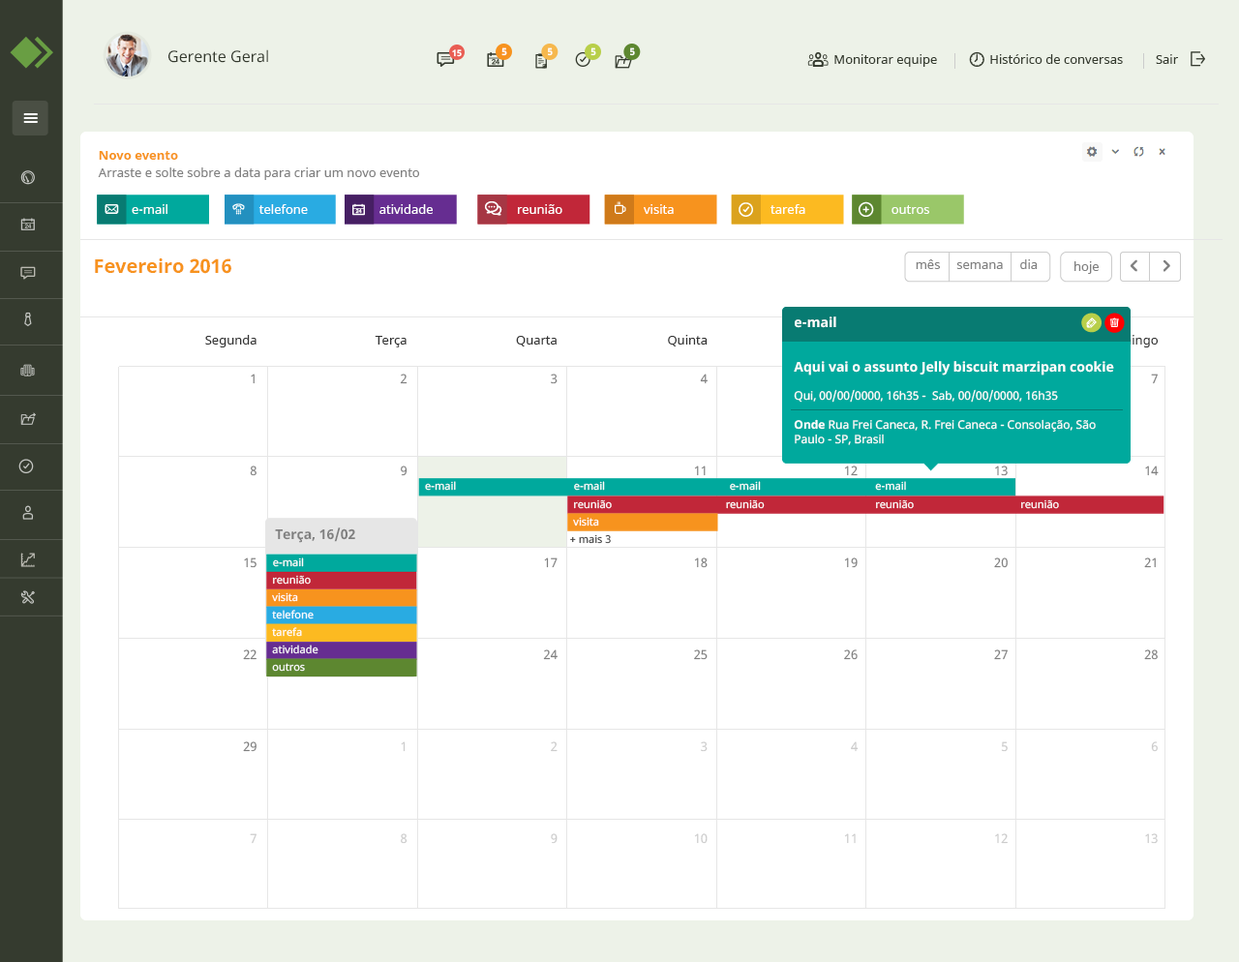
<style>
.page{position:relative;width:1239px;height:962px;background:#ffffff}
.page>*{position:absolute;margin:0}
.t1{font:15.5px "NotoSans";color:#353b2f}
.t2{font:8.7px "NotoSans-Bold";color:#ffffff}
.t3{font:9.7px "NotoSans-Bold";color:#ffffff}
.t4{font:12.6px "NotoSans";color:#353b2f}
.t5{font:12.6px "NotoSans-Bold";color:#f7931e}
.t6{font:12.6px "NotoSans";color:#808080}
.t7{font:12.6px "NotoSans";color:#ffffff}
.t8{font:19.4px "NotoSans-Bold";color:#f7931e}
.t9{font:11.6px/29px "NotoSans";color:#ffffff}
.t10{font:13.5px "NotoSans-Bold";color:#ffffff}
.t11{font:13.5px/29px "NotoSans-Bold";color:#ffffff}
.t12{font:11.6px "NotoSans";color:#ffffff}
.t13{font:11.6px/29px "NotoSans-Bold";color:#ffffff}
.t14{font:12.6px/92px "NotoSans";color:#808080}
.t15{font:12.6px/38.7px "NotoSans";color:#333333}
.t16{font:12.6px/38.7px "NotoSans";color:#808080}
.t17{font:12.6px/92px "NotoSans";color:#cccccc}
.t18{font:10.6px "NotoSans";color:#ffffff}
.t19{font:13.5px "NotoSans-Bold";color:#808080}
.t20{font:10.6px "NotoSans"}
</style>
<div class="page">
<p class="t1" style="left:168px;top:49px;width:100px;height:14px">Gerente Geral</p>
<p class="t2" style="left:452px;top:49px;width:10px;height:8px">15</p>
<p class="t3" style="left:501px;top:47px;width:6px;height:9px">5</p>
<p class="t3" style="left:548px;top:47px;width:5px;height:9px">5</p>
<p class="t3" style="left:591px;top:47px;width:5px;height:9px">5</p>
<p class="t3" style="left:630px;top:47px;width:5px;height:9px">5</p>
<p class="t4" style="left:834px;top:54px;width:344px;height:13px">Monitorar equipe                Histórico de conversas          Sair</p>
<p class="t5" style="left:99px;top:151px;width:79px;height:9px">Novo evento</p>
<p class="t6" style="left:98px;top:167px;width:321px;height:13px">Arraste e solte sobre a data para criar um novo evento</p>
<p class="t7" style="left:132px;top:204px;width:35px;height:10px">e-mail</p>
<p class="t7" style="left:258px;top:204px;width:50px;height:10px">telefone</p>
<p class="t7" style="left:379px;top:204px;width:54px;height:10px">atividade</p>
<p class="t7" style="left:518px;top:204px;width:44px;height:10px">reunião</p>
<p class="t7" style="left:644px;top:204px;width:30px;height:10px">visita</p>
<p class="t7" style="left:771px;top:204px;width:34px;height:10px">tarefa</p>
<p class="t7" style="left:892px;top:205px;width:37px;height:9px">outros</p>
<p class="t8" style="left:95px;top:258px;width:136px;height:16px">Fevereiro 2016</p>
<p class="t6" style="left:916px;top:259px;width:122px;height:10px">mês     semana     dia</p>
<p class="t6" style="left:1075px;top:261px;width:24px;height:13px">hoje</p>
<p class="t9" style="left:794px;top:317px;width:320px;height:128px"><span class="t10">e-mail<br><br></span><span class="t11">Aqui vai o assunto Jelly biscuit </span><span class="t10">marzipan cookie <br></span><span class="t12"><br>Qui, 00/00/0000, 16h35 -  Sab, 00/00/0000, 16h35<br></span><span class="t13">Onde</span> Rua Frei Caneca, R. Frei Caneca - Consolação, São <span class="t12">Paulo - SP, Brasil</span></p>
<p class="t14" style="left:205px;top:335px;width:52px;height:509px;text-align:right"><span class="t15">Segunda<br></span><span class="t16">1<br></span>8<br>15<br>22<br>29<br><span class="t17">7</span></p>
<p class="t14" style="left:516px;top:336px;width:42px;height:508px;text-align:right"><span class="t15">Quarta<br></span><span class="t16">3<br></span>10<br>17<br>24<br><span class="t17">2<br>9</span></p>
<p class="t18" style="left:425px;top:481px;width:31px;height:10px">e-mail</p>
<p class="t18" style="left:574px;top:481px;width:31px;height:10px">e-mail</p>
<p class="t18" style="left:730px;top:481px;width:31px;height:10px">e-mail</p>
<p class="t18" style="left:875px;top:481px;width:31px;height:10px">e-mail</p>
<p class="t18" style="left:574px;top:500px;width:38px;height:9px">reunião</p>
<p class="t18" style="left:726px;top:500px;width:39px;height:9px">reunião</p>
<p class="t18" style="left:876px;top:500px;width:38px;height:9px">reunião</p>
<p class="t18" style="left:1021px;top:500px;width:38px;height:9px">reunião</p>
<p class="t18" style="left:573px;top:517px;width:26px;height:10px">visita</p>
<p class="t19" style="left:275px;top:528px;width:80px;height:15px">Terça, 16/02</p>
<p class="t20" style="left:570px;top:534px;width:41px;height:10px">+ mais 3</p>
<p class="t18" style="left:273px;top:558px;width:31px;height:9px">e-mail</p>
<p class="t18" style="left:273px;top:575px;width:38px;height:10px">reunião</p>
<p class="t18" style="left:272px;top:592px;width:26px;height:10px">visita</p>
<p class="t18" style="left:272px;top:610px;width:42px;height:10px">telefone</p>
<p class="t18" style="left:272px;top:627px;width:30px;height:10px">tarefa</p>
<p class="t18" style="left:272px;top:645px;width:47px;height:9px">atividade</p>
<p class="t18" style="left:272px;top:663px;width:33px;height:9px">outros</p>
</div>
